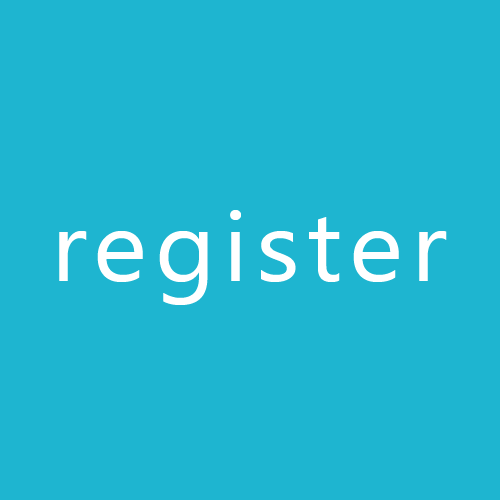
<style>
.page{position:relative;width:500px;height:500px;background:#1eb5d0}
.page>*{position:absolute;margin:0}
.t1{font:98.1px "SegoeUI";letter-spacing:0.075em;color:#ffffff;scale:1.05 1}
</style>
<div class="page">
<p class="t1" style="left:59px;top:210px;width:388px;height:95px">register</p>
</div>
